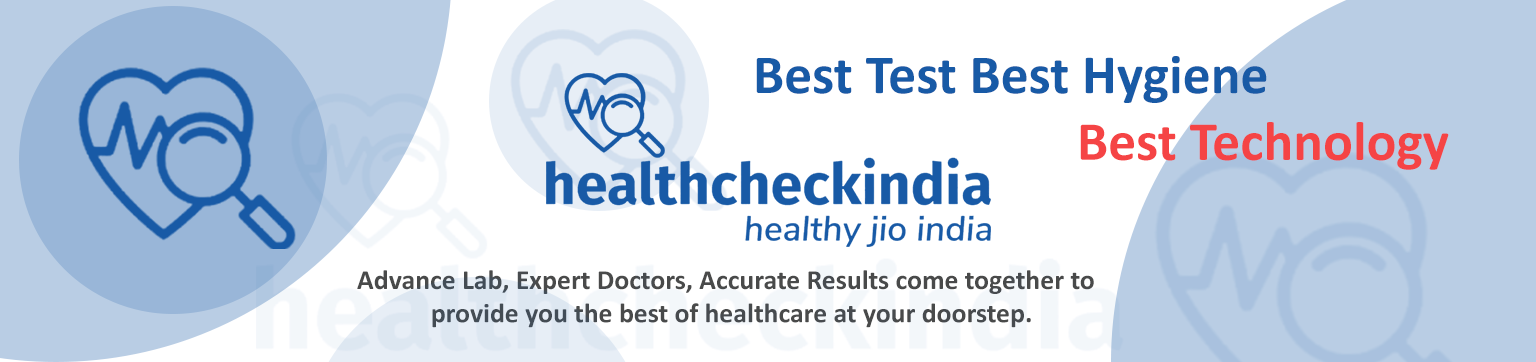
<style>
.page{position:relative;width:1536px;height:362px;background:#ffffff}
.page>*{position:absolute;margin:0}
.t1{font:55.6px "Calibri-Bold";color:#185aa6}
.t2{font:55.6px "Calibri-Bold";color:#f54445}
.t3{font:27.8px "Calibri-Bold";color:#494a4a}
</style>
<div class="page">
<p class="t1" style="left:756px;top:56px;width:693px;height:114px">Best Test Best Hygiene <br><span class="t2">         Best Technology</span></p>
<p class="t3" style="left:357px;top:270px;width:737px;height:58px">Advance Lab, Expert Doctors, Accurate Results come together to <br>       provide you the best of healthcare at your doorstep.</p>
</div>
